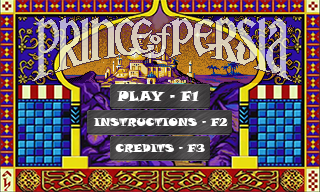
<style>
.page{position:relative;width:320px;height:192px}
.page>*{position:absolute;margin:0}
.t1{font:14px "SnapITC-Regular";color:#ffffff}
.t2{font:11px "SnapITC-Regular";color:#ffffff}
</style>
<div class="page">
<p class="t1" style="left:117px;top:91px;width:82px;height:11px">PLAY - F1</p>
<p class="t2" style="left:93px;top:118px;width:135px;height:9px">INSTRUCTIONS - F2</p>
<p class="t2" style="left:115px;top:144px;width:90px;height:9px">CREDITS - F3</p>
</div>
